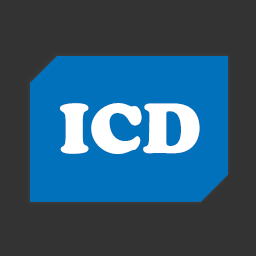
<style>
.page{position:relative;width:256px;height:256px;background:#333333}
.page>*{position:absolute;margin:0}
.t1{font:70px "CooperBlackStd";color:#ffffff}
</style>
<div class="page">
<p class="t1" style="left:60px;top:103px;width:140px;height:51px">ICD</p>
</div>
